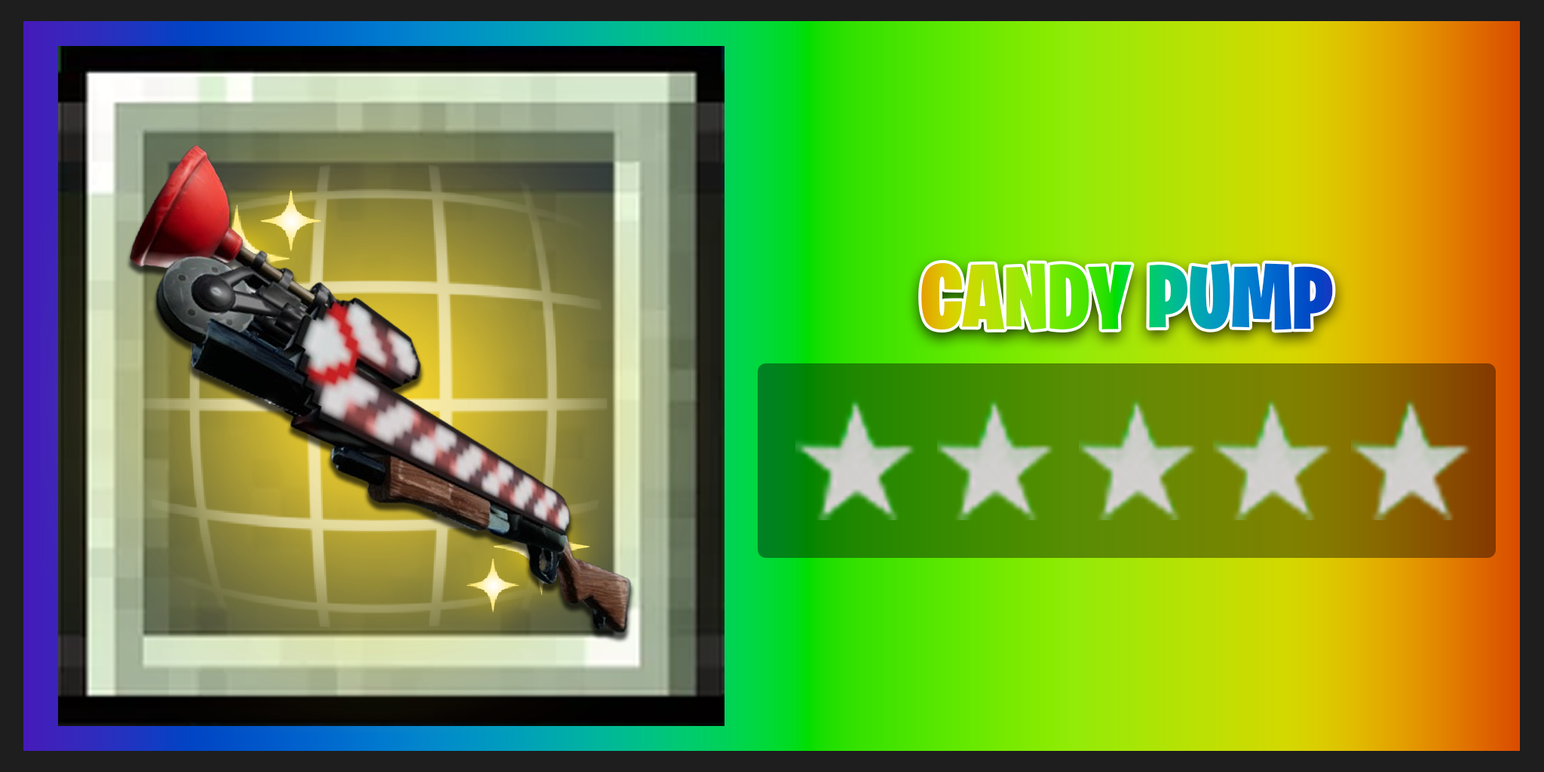
<style>
.page{position:relative;width:1544px;height:772px}
.page>*{position:absolute;margin:0}
.t1{font:90.5px "BurbankBigCondensed-Black"}
</style>
<div class="page">
<p class="t1" style="left:921px;top:262px;width:412px;height:68px">CANDY PUMP</p>
</div>
